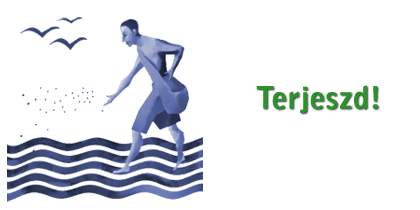
<style>
.page{position:relative;width:420px;height:210px;background:#ffffff}
.page>*{position:absolute;margin:0}
.t1{font:30px "BellGothicStd-Bold";letter-spacing:0.01em;color:#299429;font-weight:bold}
</style>
<div class="page">
<p class="t1" style="left:256px;top:85px;width:122px;height:28px">Terjeszd!</p>
</div>
